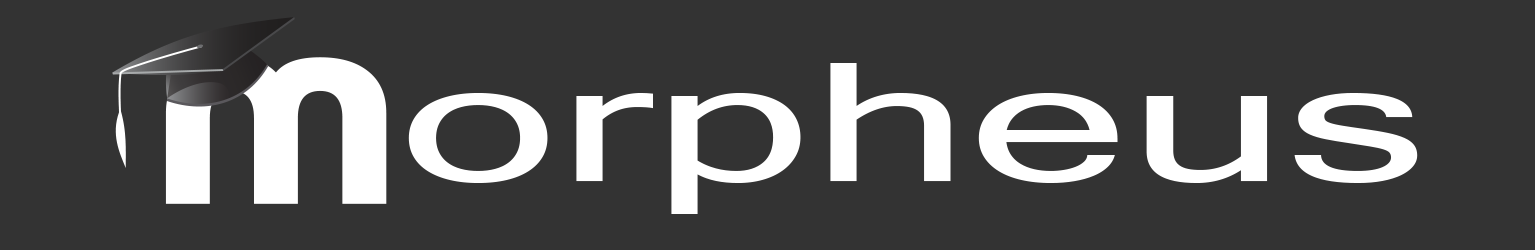
<style>
.page{position:relative;width:1535px;height:250px;background:#333333}
.page>*{position:absolute;margin:0}
.t1{font:183.1px "Raavi";color:#ffffff;scale:1.73 1}
</style>
<div class="page">
<p class="t1" style="left:408px;top:63px;width:1010px;height:151px">orpheus</p>
</div>
